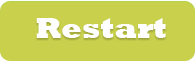
<style>
.page{position:relative;width:196px;height:63px;background:#c8d04c}
.page>*{position:absolute;margin:0}
.t1{font:30px "Rockwell-ExtraBold";color:#ffffff}
</style>
<div class="page">
<p class="t1" style="left:36px;top:18px;width:130px;height:20px">Restart</p>
</div>
